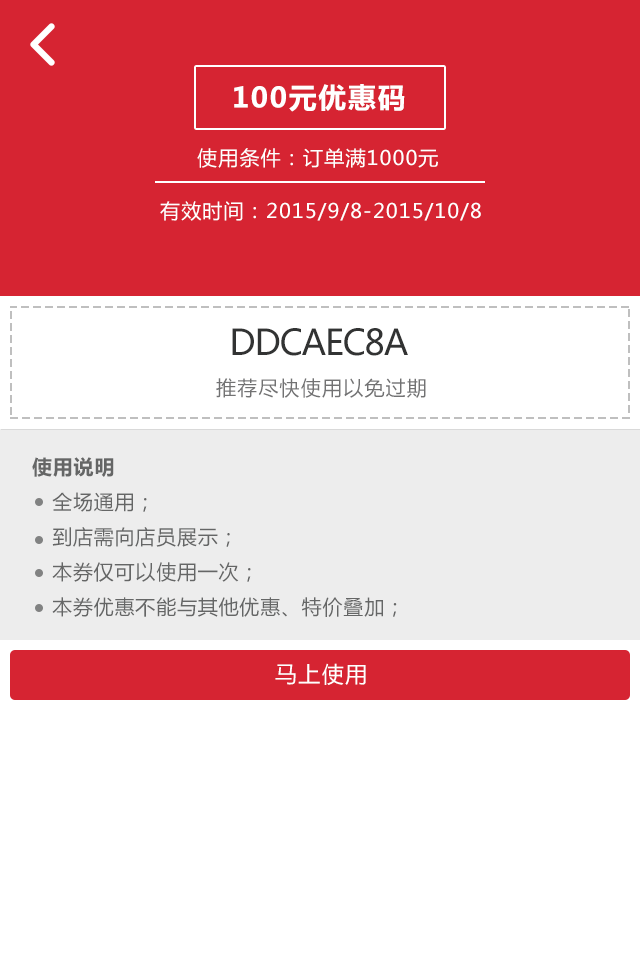
<style>
.page{position:relative;width:640px;height:960px;background:#ffffff}
.page>*{position:absolute;margin:0}
.t1{font:28px "MicrosoftYaHei-Bold";letter-spacing:0.06em;color:#ffffff}
.t2{font:20px "MicrosoftYaHei";letter-spacing:0.06em;color:#ffffff}
.t3{font:35px "MicrosoftYaHei";letter-spacing:-0.04em;color:#323333}
.t4{font:20px "MicrosoftYaHei";letter-spacing:0.06em;color:#727273}
.t5{font:20px "MicrosoftYaHei";letter-spacing:0.04em;color:#656666}
.t6{font:20px "MicrosoftYaHei-Bold";letter-spacing:0.04em;color:#656666}
.t7{font:22px "MicrosoftYaHei";letter-spacing:0.06em;color:#ffffff}
</style>
<div class="page">
<p class="t1" style="left:234px;top:84px;width:171px;height:28px">100元优惠码</p>
<p class="t2" style="left:197px;top:148px;width:241px;height:20px">使用条件：订单满1000元</p>
<p class="t2" style="left:160px;top:201px;width:321px;height:20px">有效时间：2015/9/8-2015/10/8</p>
<p class="t3" style="left:232px;top:328px;width:176px;height:28px">DDCAEC8A</p>
<p class="t4" style="left:216px;top:378px;width:210px;height:20px">推荐尽快使用以免过期</p>
<p class="t5" style="left:32px;top:457px;width:365px;height:160px"><span class="t6">使用说明<br></span>   全场通用；<br>   到店需向店员展示；<br>   本券仅可以使用一次；<br>   本券优惠不能与其他优惠、特价叠加；</p>
<p class="t7" style="left:275px;top:663px;width:91px;height:22px">马上使用</p>
</div>
